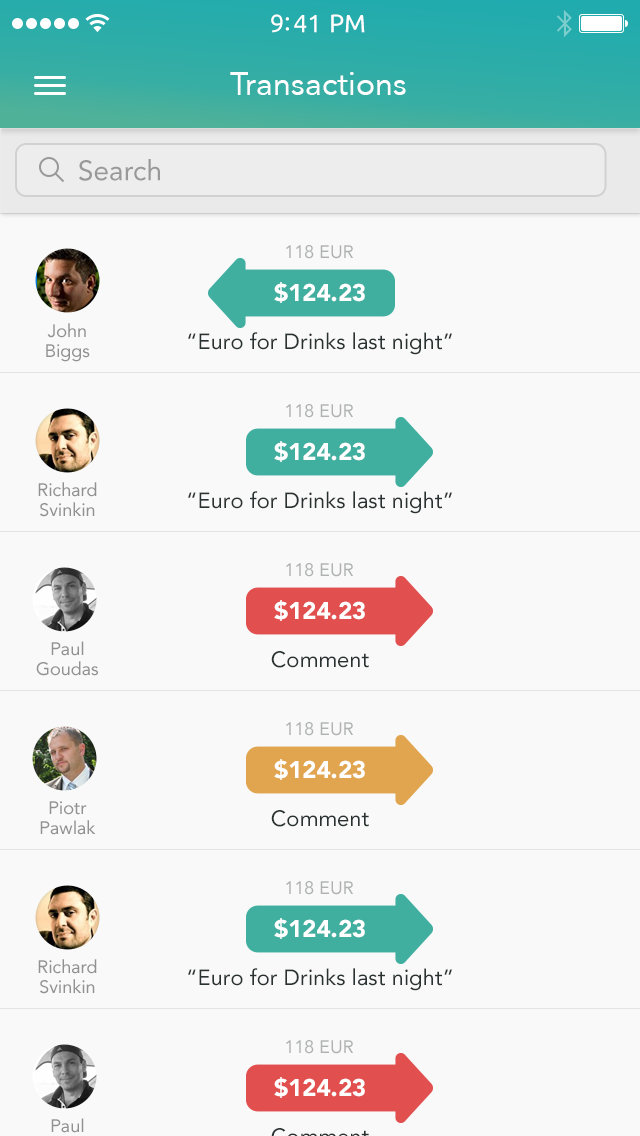
<style>
.page{position:relative;width:640px;height:1136px;background:#f9f9f9}
.page>*{position:absolute;margin:0}
.t1{font:25px "Ubuntu";color:#ffffff}
.t2{font:32px "Avenir-Roman";color:#ffffff}
.t3{font:28px "Avenir-Roman";color:#999999}
.t4{font:18px "Avenir-Roman";color:#b0b2b2}
.t5{font:24px "Avenir-Black";color:#ffffff}
.t6{font:18px/20px "Avenir-Roman";color:#919191}
.t7{font:22px "Avenir-Roman";color:#2a3231}
</style>
<div class="page">
<p class="t1" style="left:271px;top:14px;width:94px;height:19px">9:41 PM</p>
<p class="t2" style="left:230px;top:72px;width:176px;height:23px">Transactions</p>
<p class="t3" style="left:79px;top:159px;width:81px;height:22px">Search</p>
<p class="t4" style="left:286px;top:245px;width:67px;height:14px">118 EUR</p>
<p class="t5" style="left:274px;top:282px;width:91px;height:21px">$124.23</p>
<p class="t6" style="left:46px;top:323px;width:44px;height:39px;text-align:center">John Biggs</p>
<p class="t7" style="left:188px;top:332px;width:264px;height:23px">“Euro for Drinks last night”</p>
<p class="t4" style="left:286px;top:404px;width:67px;height:14px">118 EUR</p>
<p class="t5" style="left:274px;top:441px;width:91px;height:21px">$124.23</p>
<p class="t6" style="left:38px;top:482px;width:59px;height:35px;text-align:center">Richard Svinkin</p>
<p class="t7" style="left:188px;top:491px;width:264px;height:23px">“Euro for Drinks last night”</p>
<p class="t4" style="left:286px;top:563px;width:67px;height:14px">118 EUR</p>
<p class="t5" style="left:274px;top:600px;width:91px;height:21px">$124.23</p>
<p class="t6" style="left:36px;top:641px;width:62px;height:35px;text-align:center">Paul Goudas</p>
<p class="t7" style="left:271px;top:651px;width:98px;height:17px">Comment</p>
<p class="t4" style="left:286px;top:722px;width:67px;height:14px">118 EUR</p>
<p class="t5" style="left:274px;top:759px;width:91px;height:21px">$124.23</p>
<p class="t6" style="left:40px;top:801px;width:56px;height:34px;text-align:center">Piotr Pawlak</p>
<p class="t7" style="left:271px;top:810px;width:98px;height:17px">Comment</p>
<p class="t4" style="left:286px;top:881px;width:67px;height:14px">118 EUR</p>
<p class="t5" style="left:274px;top:918px;width:91px;height:21px">$124.23</p>
<p class="t6" style="left:38px;top:959px;width:59px;height:35px;text-align:center">Richard Svinkin</p>
<p class="t7" style="left:188px;top:968px;width:264px;height:23px">“Euro for Drinks last night”</p>
<p class="t4" style="left:286px;top:1040px;width:67px;height:14px">118 EUR</p>
<p class="t5" style="left:274px;top:1077px;width:91px;height:21px">$124.23</p>
</div>
